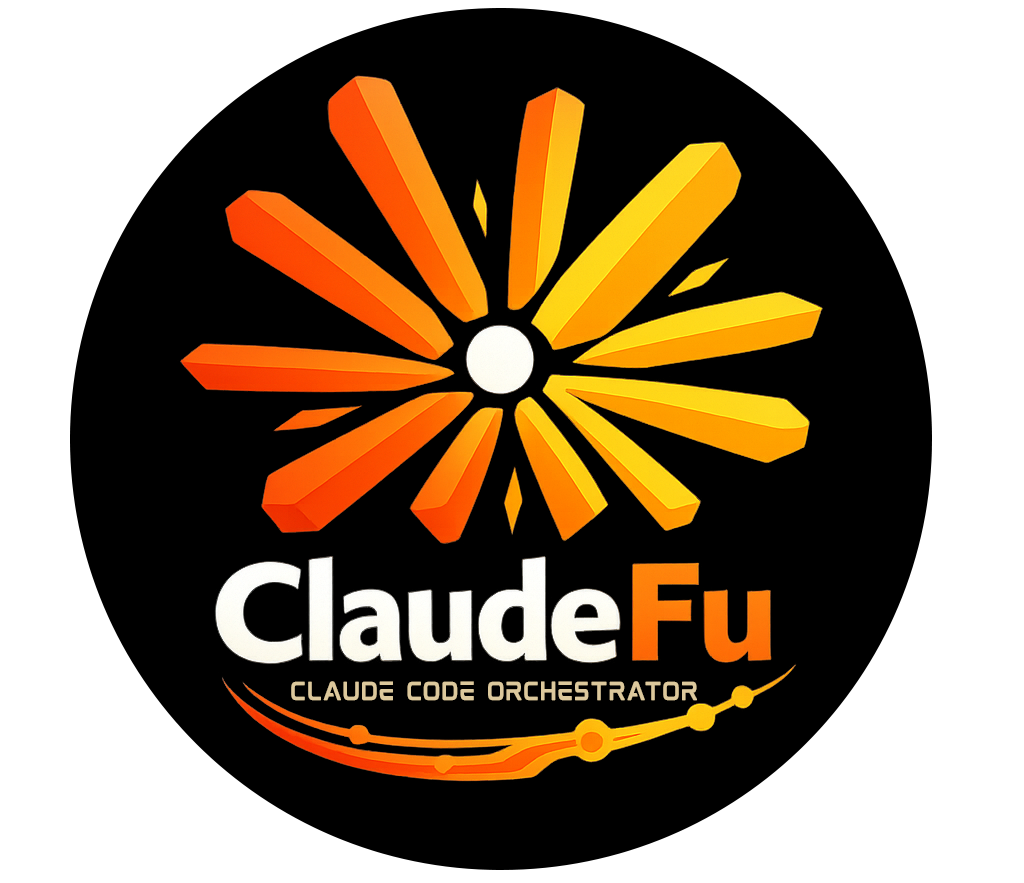
<style>
.page{position:relative;width:1024px;height:883px;background:#000000}
.page>*{position:absolute;margin:0}
.t1{font:20.9px "MokotoGlitchRegular";letter-spacing:-0.05em;color:#dcc89c;font-weight:bold;scale:0.91 1}
</style>
<div class="page">
<p class="t1" style="left:291px;top:681px;width:406px;height:20px">CLAUDE CODE ORCHESTRATOR</p>
</div>
